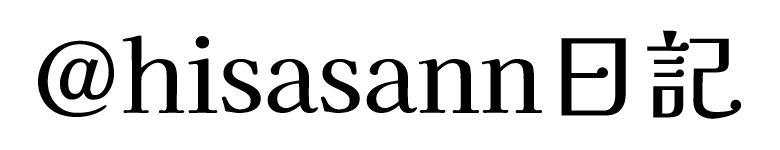
<style>
.page{position:relative;width:780px;height:150px;background:#ffffff}
.page>*{position:absolute;margin:0}
.t1{font:100px "KaiseiHarunoUmi-Medium";color:#000000}
</style>
<div class="page">
<p class="t1" style="left:38px;top:30px;width:703px;height:89px">@hisasann日記</p>
</div>
